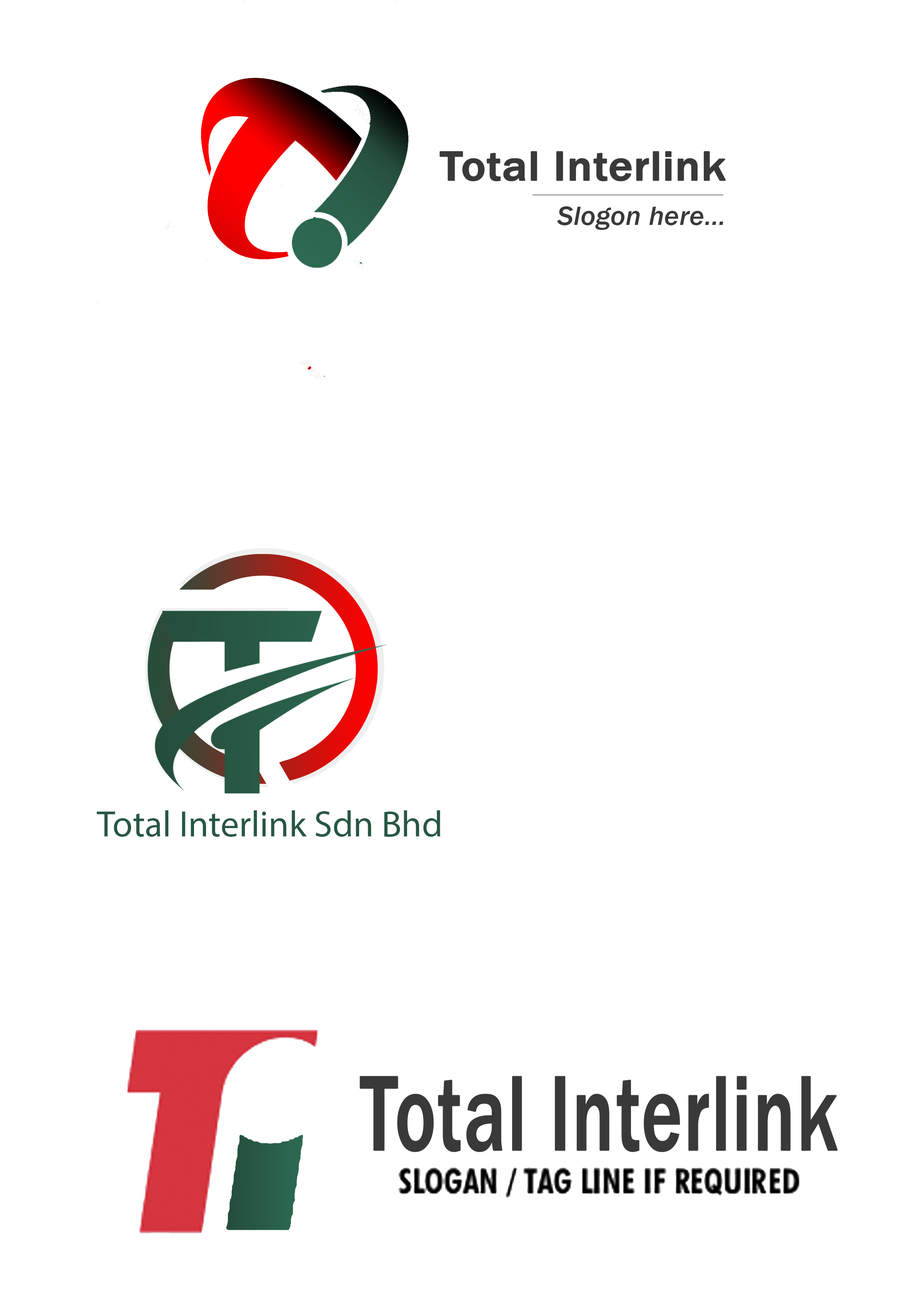
<style>
.page{position:relative;width:923px;height:1292px;background:#ffffff}
.page>*{position:absolute;margin:0}
.t1{font:42.9px "FranklinGothic-Medium";color:#393939;font-weight:bold;scale:1.07 1}
.t2{font:27.1px "FranklinGothic-MediumItalic";color:#393939;scale:1.07 1}
.t3{font:36.8px "MyriadPro-Regular";color:#275743}
.t4{font:110.2px "FranklinGothic-Medium";color:#393939;font-weight:bold;scale:0.7 1}
</style>
<div class="page">
<p class="t1" style="left:439px;top:151px;width:287px;height:31px">Total Interlink</p>
<p class="t2" style="left:557px;top:206px;width:166px;height:24px">Slogon here...</p>
<p class="t3" style="left:97px;top:811px;width:343px;height:26px">Total Interlink Sdn Bhd</p>
<p class="t4" style="left:359px;top:1076px;width:478px;height:77px">Total Interlink</p>
</div>
